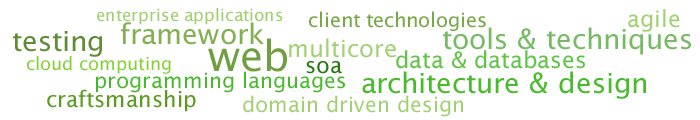
<style>
.page{position:relative;width:700px;height:120px;background:#ffffff}
.page>*{position:absolute;margin:0}
.t1{font:17px "LucidaSans";color:#a0d071}
.t2{font:20px "LucidaSans";color:#78a948}
.t3{font:23px "LucidaSans";color:#a0d071}
.t4{font:28px "LucidaSans";color:#80b050}
.t5{font:28px "LucidaSans";color:#76ba64}
.t6{font:28px "LucidaSans";color:#5f8c34}
.t7{font:42px "LucidaSans";color:#6f9f40}
.t8{font:24px "LucidaSans";color:#a0d071}
.t9{font:23px "LucidaSans";color:#61c347}
.t10{font:18px "LucidaSans";color:#82d035}
.t11{font:22px "LucidaSans";color:#24790e}
.t12{font:21px "LucidaSans";color:#48b92a}
.t13{font:28px "LucidaSans";color:#49ba2b}
.t14{font:22px "LucidaSans";color:#5c9a20}
.t15{font:21px "LucidaSans";color:#a0d071}
</style>
<div class="page">
<p class="t1" style="left:97px;top:8px;width:186px;height:17px">enterprise applications</p>
<p class="t2" style="left:309px;top:11px;width:177px;height:20px">client technologies</p>
<p class="t3" style="left:628px;top:9px;width:52px;height:23px">agile</p>
<p class="t4" style="left:121px;top:22px;width:143px;height:23px">framework</p>
<p class="t5" style="left:443px;top:27px;width:248px;height:28px">tools &amp; techniques</p>
<p class="t6" style="left:13px;top:31px;width:89px;height:26px">testing</p>
<p class="t7" style="left:208px;top:38px;width:79px;height:34px">web</p>
<p class="t8" style="left:289px;top:38px;width:107px;height:20px">multicore</p>
<p class="t9" style="left:396px;top:50px;width:189px;height:19px">data &amp; databases</p>
<p class="t10" style="left:27px;top:56px;width:144px;height:18px">cloud computing</p>
<p class="t11" style="left:306px;top:61px;width:36px;height:13px">soa</p>
<p class="t12" style="left:96px;top:71px;width:249px;height:22px">programming languages</p>
<p class="t13" style="left:362px;top:71px;width:284px;height:28px">architecture &amp; design</p>
<p class="t14" style="left:47px;top:89px;width:149px;height:23px">craftsmanship</p>
<p class="t15" style="left:243px;top:95px;width:220px;height:22px">domain driven design</p>
</div>
